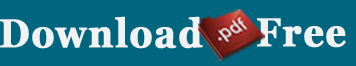
<style>
.page{position:relative;width:356px;height:66px;background:#006680}
.page>*{position:absolute;margin:0}
.t1{font:39.9px "Georgia-Bold";letter-spacing:0.025em;color:#f2f2f2;font-weight:bold;scale:0.9 1}
</style>
<div class="page">
<p class="t1" style="left:0px;top:16px;width:203px;height:33px">Download</p>
<p class="t1" style="left:257px;top:18px;width:89px;height:30px">Free</p>
</div>
